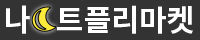
<style>
.page{position:relative;width:200px;height:40px;background:#333333}
.page>*{position:absolute;margin:0}
.t1{font:30px "NotoSansCJKkr-Bold";color:#ffffff}
</style>
<div class="page">
<p class="t1" style="left:6px;top:5px;width:187px;height:29px">나   트플리마켓</p>
</div>
